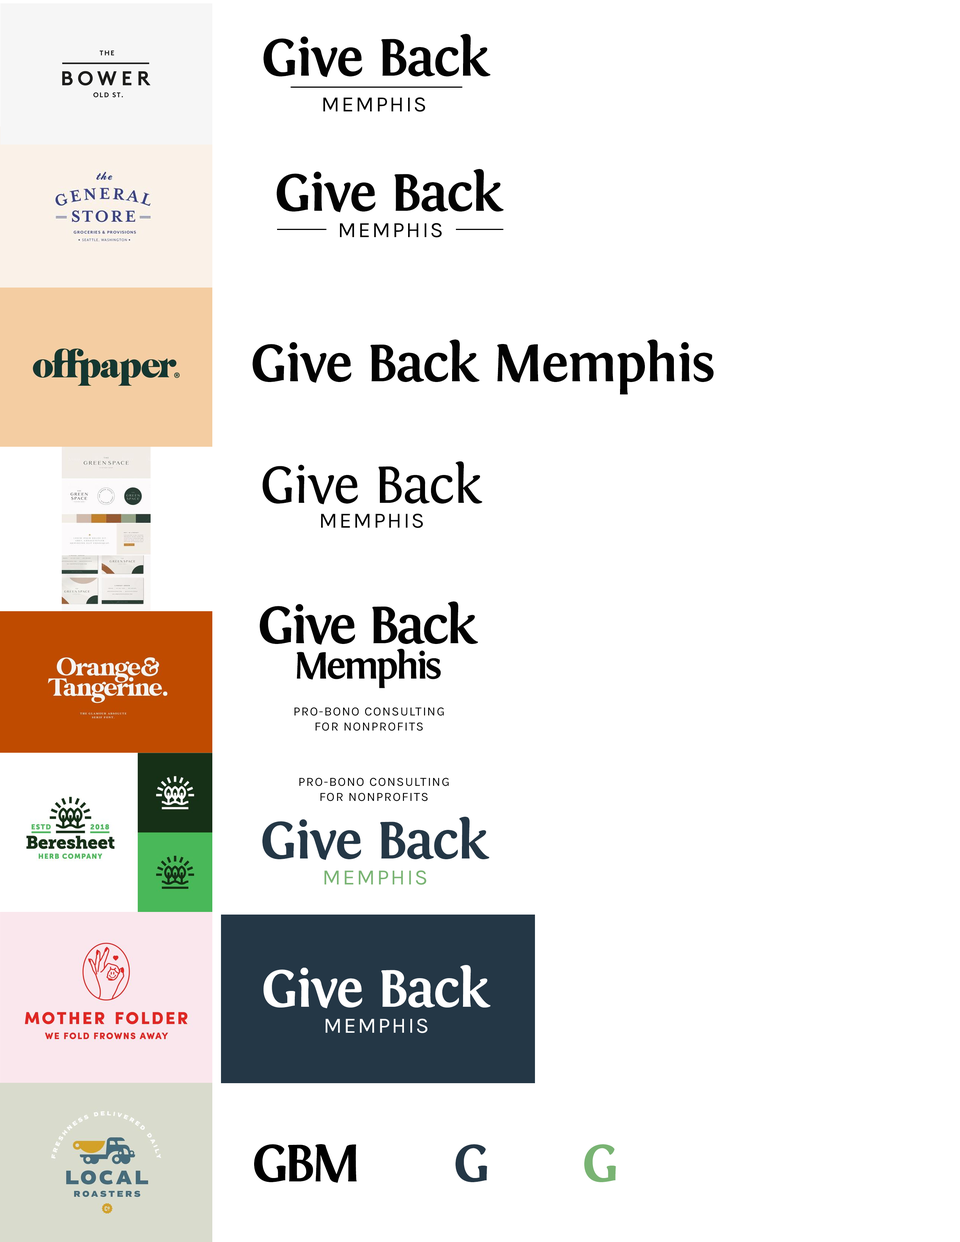
<style>
.page{position:relative;width:960px;height:1242px;background:#ffffff}
.page>*{position:absolute;margin:0}
.t1{font:54.9px "Fontin-Bold";letter-spacing:-0.03em;color:#030303}
.t2{font:22px "Karla-Regular";letter-spacing:0.075em;color:#030303}
.t3{font:54.9px "Fontin-Regular";letter-spacing:-0.03em;color:#030303}
.t4{font:54.9px "Fontin-Bold";letter-spacing:-0.05em;color:#030303}
.t5{font:39.2px "Fontin-Bold";letter-spacing:-0.075em;color:#030303}
.t6{font:12.5px "Karla-Regular";letter-spacing:0.075em;color:#030303}
.t7{font:54.9px "Fontin-Bold";letter-spacing:-0.03em;color:#243746}
.t8{font:22px "Karla-Regular";letter-spacing:0.075em;color:#79b473}
.t9{font:54.9px "Fontin-Bold";letter-spacing:-0.03em;color:#ffffff}
.t10{font:22px "Karla-Regular";letter-spacing:0.075em;color:#ffffff}
.t11{font:54.9px "Fontin-Bold";letter-spacing:-0.05em;color:#000000}
.t12{font:54.9px "Fontin-Bold";letter-spacing:-0.05em;color:#243746}
.t13{font:54.9px "Fontin-Bold";letter-spacing:-0.05em;color:#79b473}
</style>
<div class="page">
<p class="t1" style="left:264px;top:34px;width:226px;height:43px">Give Back</p>
<p class="t2" style="left:323px;top:97px;width:102px;height:15px">MEMPHIS</p>
<p class="t1" style="left:277px;top:169px;width:227px;height:43px">Give Back</p>
<p class="t2" style="left:340px;top:223px;width:102px;height:15px">MEMPHIS</p>
<p class="t1" style="left:253px;top:340px;width:461px;height:55px">Give Back Memphis</p>
<p class="t3" style="left:262px;top:461px;width:220px;height:43px">Give Back</p>
<p class="t2" style="left:321px;top:513px;width:102px;height:15px">MEMPHIS</p>
<p class="t4" style="left:260px;top:602px;width:218px;height:43px">Give Back</p>
<p class="t5" style="left:297px;top:649px;width:144px;height:39px">Memphis</p>
<p class="t6" style="left:294px;top:707px;width:150px;height:24px;text-align:center">PRO-BONO CONSULTING<br>FOR NONPROFITS</p>
<p class="t6" style="left:299px;top:778px;width:150px;height:23px;text-align:center">PRO-BONO CONSULTING<br>FOR NONPROFITS</p>
<p class="t7" style="left:262px;top:817px;width:227px;height:43px">Give Back</p>
<p class="t8" style="left:324px;top:870px;width:103px;height:15px">MEMPHIS</p>
<p class="t9" style="left:264px;top:965px;width:226px;height:43px">Give Back</p>
<p class="t10" style="left:326px;top:1019px;width:102px;height:14px">MEMPHIS</p>
<p class="t11" style="left:254px;top:1144px;width:103px;height:39px">GBM</p>
<p class="t12" style="left:455px;top:1144px;width:32px;height:38px">G</p>
<p class="t13" style="left:584px;top:1144px;width:32px;height:38px">G</p>
</div>
